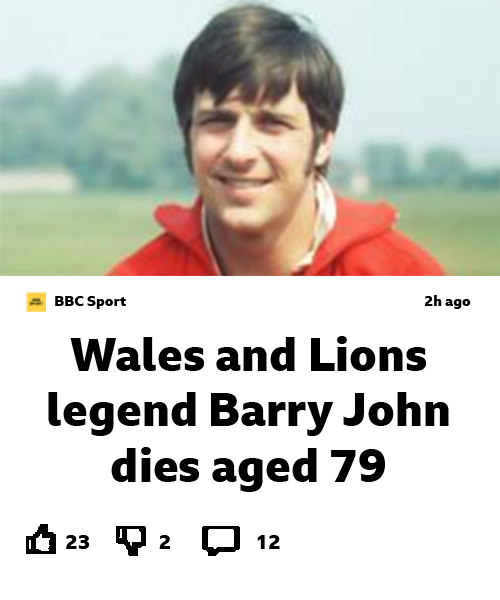
<style>
.page{position:relative;width:500px;height:600px;background:#ffffff}
.page>*{position:absolute;margin:0}
.t1{font:14.3px "BBCReithSans-XBold";color:#000000}
.t2{font:46px "BBCReithSans-XBold";color:#000000}
.t3{font:20px "BBCReithSans-XBold";color:#000000}
</style>
<div class="page">
<p class="t1" style="left:55px;top:296px;width:71px;height:13px">BBC Sport</p>
<p class="t1" style="left:425px;top:295px;width:46px;height:14px">2h ago</p>
<p class="t2" style="left:48px;top:336px;width:401px;height:156px;text-align:center">Wales and Lions legend Barry John dies aged 79</p>
<p class="t3" style="left:66px;top:535px;width:24px;height:14px">23</p>
<p class="t3" style="left:159px;top:535px;width:11px;height:14px">2</p>
<p class="t3" style="left:257px;top:535px;width:23px;height:14px">12</p>
</div>
